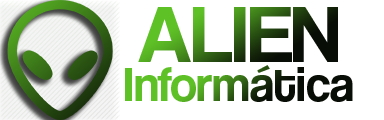
<style>
.page{position:relative;width:384px;height:120px;background:#ffffff}
.page>*{position:absolute;margin:0}
.t1{font:83.3px "CoolveticaRg-Regular"}
.t2{font:50px "CoolveticaRg-Regular"}
</style>
<div class="page">
<p class="t1" style="left:138px;top:7px;width:200px;height:55px">ALIEN</p>
<p class="t2" style="left:125px;top:65px;width:228px;height:37px">Informática</p>
</div>
